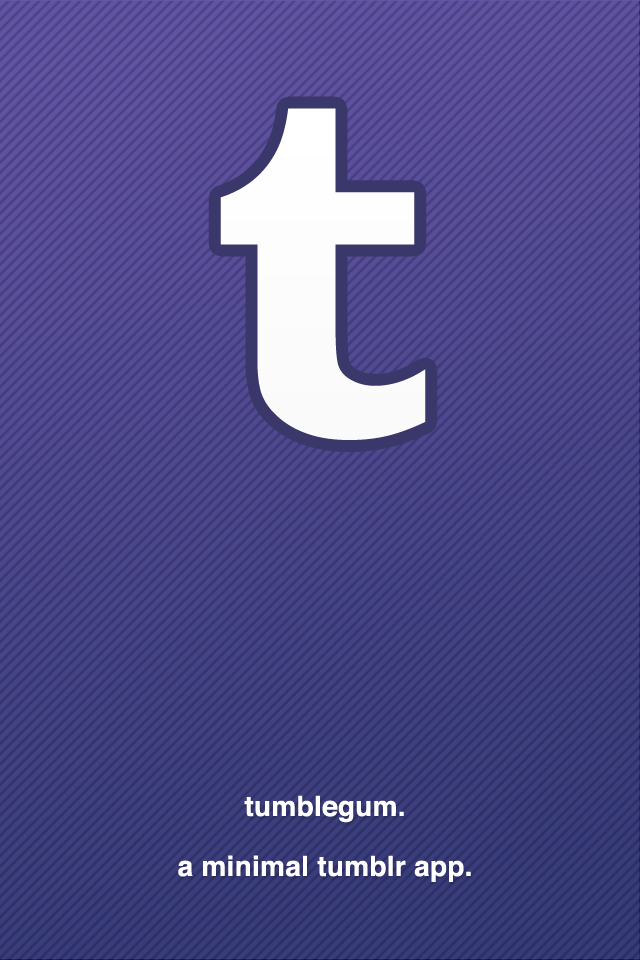
<style>
.page{position:relative;width:640px;height:960px}
.page>*{position:absolute;margin:0}
.t1{font:500px "BookmanOldStyle-Bold";letter-spacing:0.01em;color:#ffffff}
.t2{font:28px/60px "Helvetica-Bold";letter-spacing:0.01em;color:#ffffff}
</style>
<div class="page">
<p class="t1" style="left:220px;top:108px;width:206px;height:332px">t</p>
<p class="t2" style="left:178px;top:795px;width:293px;height:87px;text-align:center">tumblegum.<br>a minimal tumblr app.</p>
</div>
